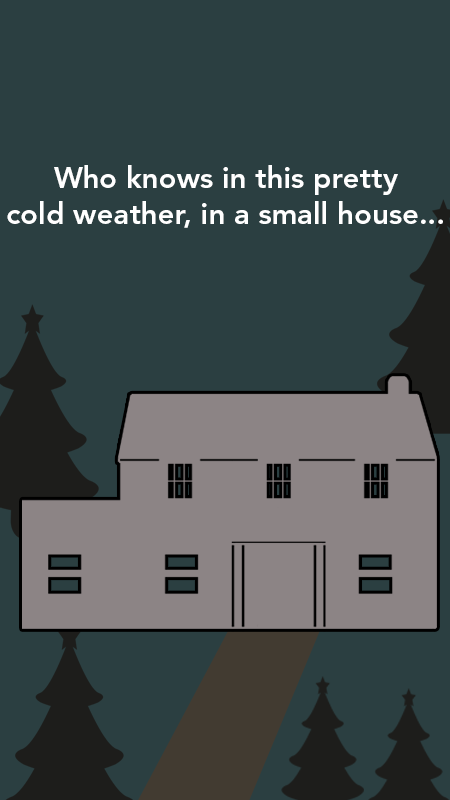
<style>
.page{position:relative;width:450px;height:800px;background:#2b3f41}
.page>*{position:absolute;margin:0}
.t1{font:29.4px "AvenirLTStd-Heavy";color:#ffffff}
</style>
<div class="page">
<p class="t1" style="left:7px;top:165px;width:436px;height:63px;text-align:center">Who knows in this pretty<br>cold weather, in a small house...</p>
</div>
